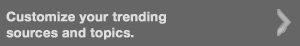
<style>
.page{position:relative;width:300px;height:46px;background:#666666}
.page>*{position:absolute;margin:0}
.t1{font:13px "HelveticaNeue-Bold";color:#dddddd;font-weight:bold}
</style>
<div class="page">
<p class="t1" style="left:6px;top:11px;width:160px;height:29px">Customize your trending<br>sources and topics.</p>
</div>
